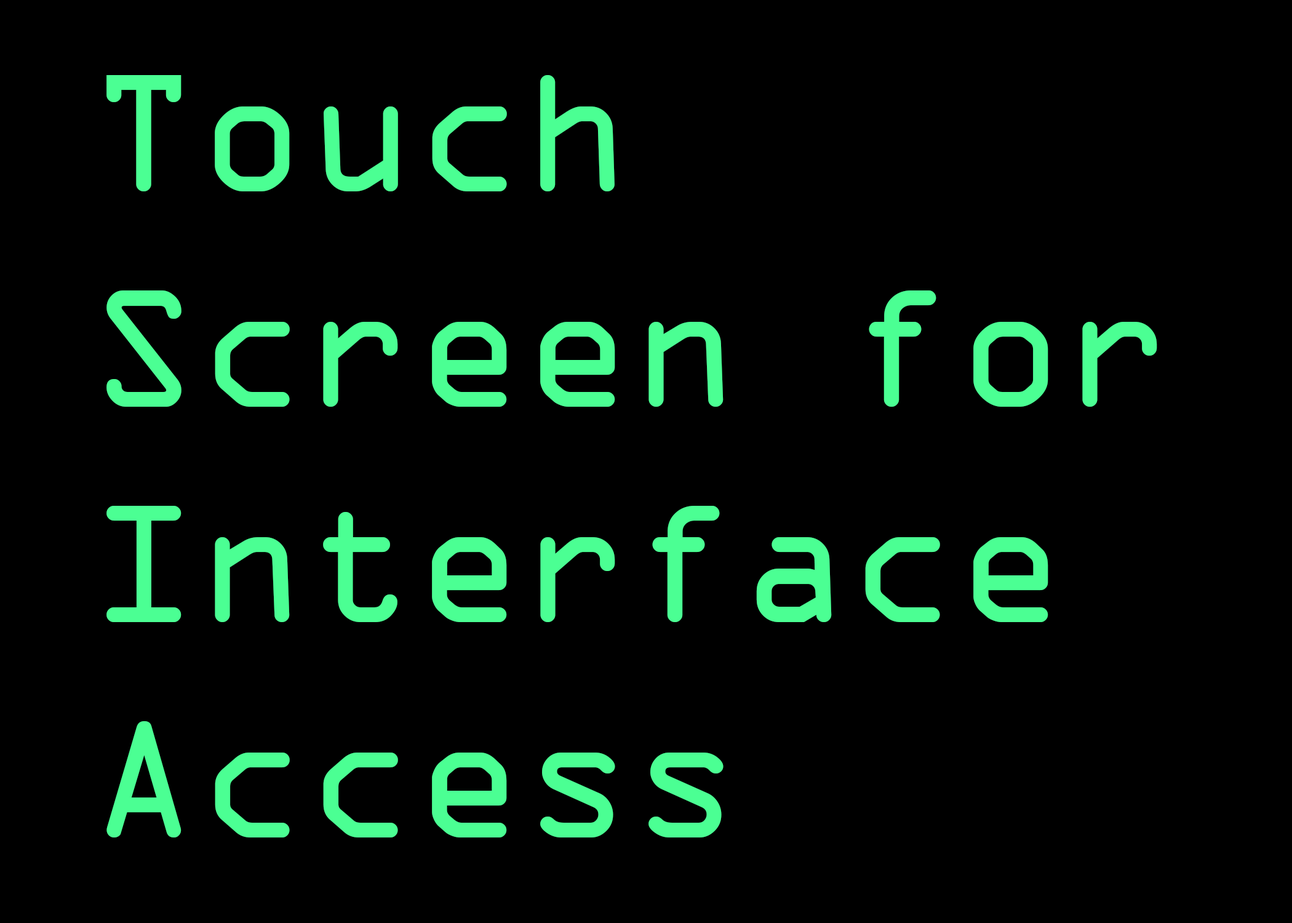
<style>
.page{position:relative;width:1292px;height:923px;background:#000000}
.page>*{position:absolute;margin:0}
.t1{font:179.5px "OCRAExtended";color:#4bff93}
</style>
<div class="page">
<p class="t1" style="left:106px;top:75px;width:1051px;height:762px">Touch Screen for Interface  <br>Access</p>
</div>
